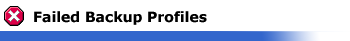
<style>
.page{position:relative;width:350px;height:41px;background:#ffffff}
.page>*{position:absolute;margin:0}
.t1{font:14px "Verdana-Bold";color:#000000}
</style>
<div class="page">
<p class="t1" style="left:34px;top:11px;width:173px;height:14px">Failed Backup Profiles</p>
</div>
